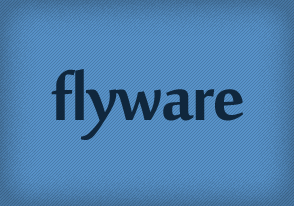
<style>
.page{position:relative;width:294px;height:206px;background:#5792c9}
.page>*{position:absolute;margin:0}
.t1{font:100px "MoolBoran";letter-spacing:-0.025em;color:#10273d}
</style>
<div class="page">
<p class="t1" style="left:51px;top:69px;width:192px;height:71px">flyware</p>
</div>
